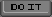
<style>
.page{position:relative;width:52px;height:17px}
.page>*{position:absolute;margin:0}
.t1{font:8.5px "RetroComputer";color:#000000}
</style>
<div class="page">
<p class="t1" style="left:11px;top:4px;width:30px;height:6px">DO IT</p>
</div>
